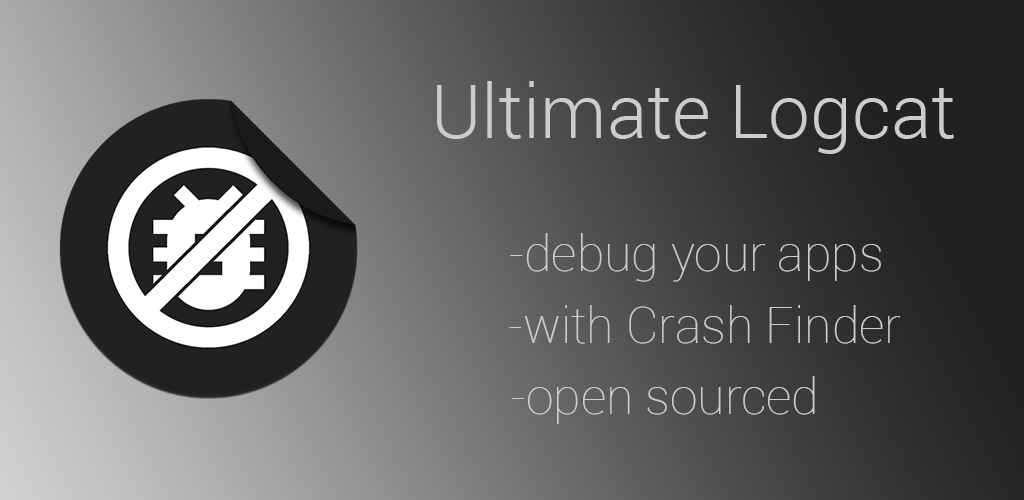
<style>
.page{position:relative;width:1024px;height:500px}
.page>*{position:absolute;margin:0}
.t1{font:75px "Roboto-Light";color:#cccccc}
.t2{font:50px "Roboto-Thin";color:#cccccc}
.t3{font:12px "Roboto-Thin";color:#cccccc}
</style>
<div class="page">
<p class="t1" style="left:437px;top:81px;width:517px;height:73px">Ultimate Logcat</p>
<p class="t2" style="left:510px;top:233px;width:371px;height:49px">-debug your apps</p>
<p class="t2" style="left:509px;top:305px;width:392px;height:39px">-with Crash Finder</p>
<p class="t3" style="left:512px;top:376px;width:303px;height:48px;text-align:center">-open sourced</p>
</div>
